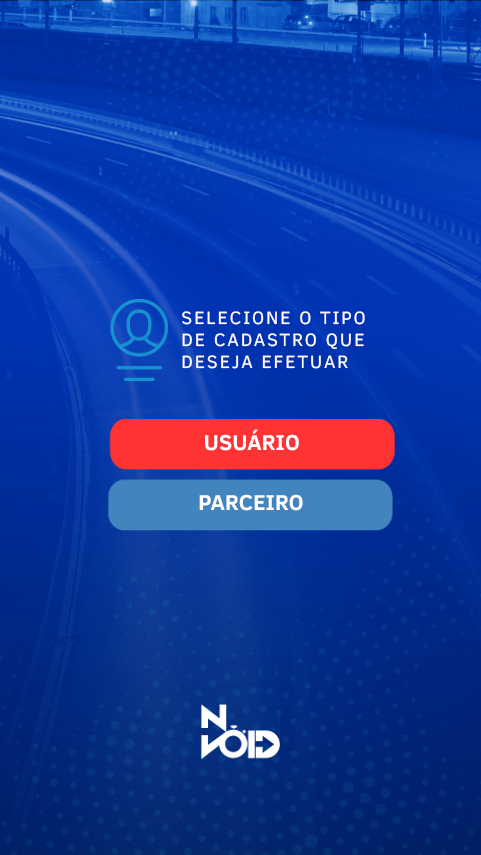
<style>
.page{position:relative;width:481px;height:855px}
.page>*{position:absolute;margin:0}
.t1{font:18.3px "ClearSans";letter-spacing:0.1em;color:#ffffff}
.t2{font:22.1px "ClearSans-Bold";color:#ffffff}
</style>
<div class="page">
<p class="t1" style="left:182px;top:311px;width:183px;height:58px">SELECIONE O TIPO <br>DE CADASTRO QUE <br>DESEJA EFETUAR</p>
<p class="t2" style="left:205px;top:429px;width:94px;height:22px">USUÁRIO</p>
<p class="t2" style="left:199px;top:494px;width:104px;height:17px">PARCEIRO</p>
</div>
